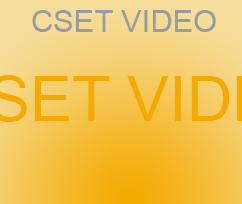
<style>
.page{position:relative;width:242px;height:204px}
.page>*{position:absolute;margin:0}
.t1{font:30.9px "ArialMT";color:#969da1}
</style>
<div class="page">
<p class="t1" style="left:32px;top:10px;width:184px;height:22px">CSET VIDEO</p>
</div>
